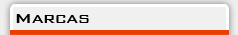
<style>
.page{position:relative;width:238px;height:35px;background:#f1f0f0}
.page>*{position:absolute;margin:0}
.t1{font:18px "BankGothicBT-Medium";color:#000000}
</style>
<div class="page">
<p class="t1" style="left:16px;top:14px;width:73px;height:9px">Marcas</p>
</div>
